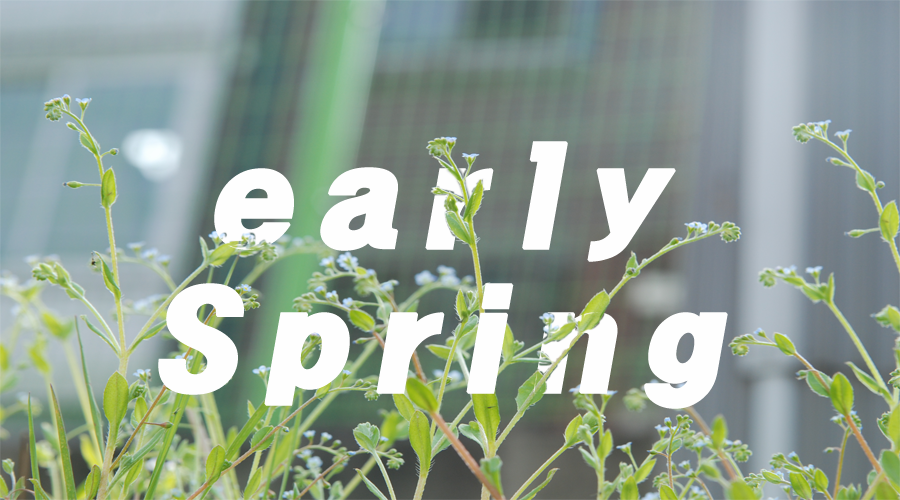
<style>
.page{position:relative;width:900px;height:500px}
.page>*{position:absolute;margin:0}
.t1{font:120px "HeadlineR-HM";letter-spacing:0.16em;color:#fefefe;font-weight:bold;font-style:italic}
</style>
<div class="page">
<p class="t1" style="left:158px;top:141px;width:570px;height:268px;text-align:center">early<br>Spring</p>
</div>
